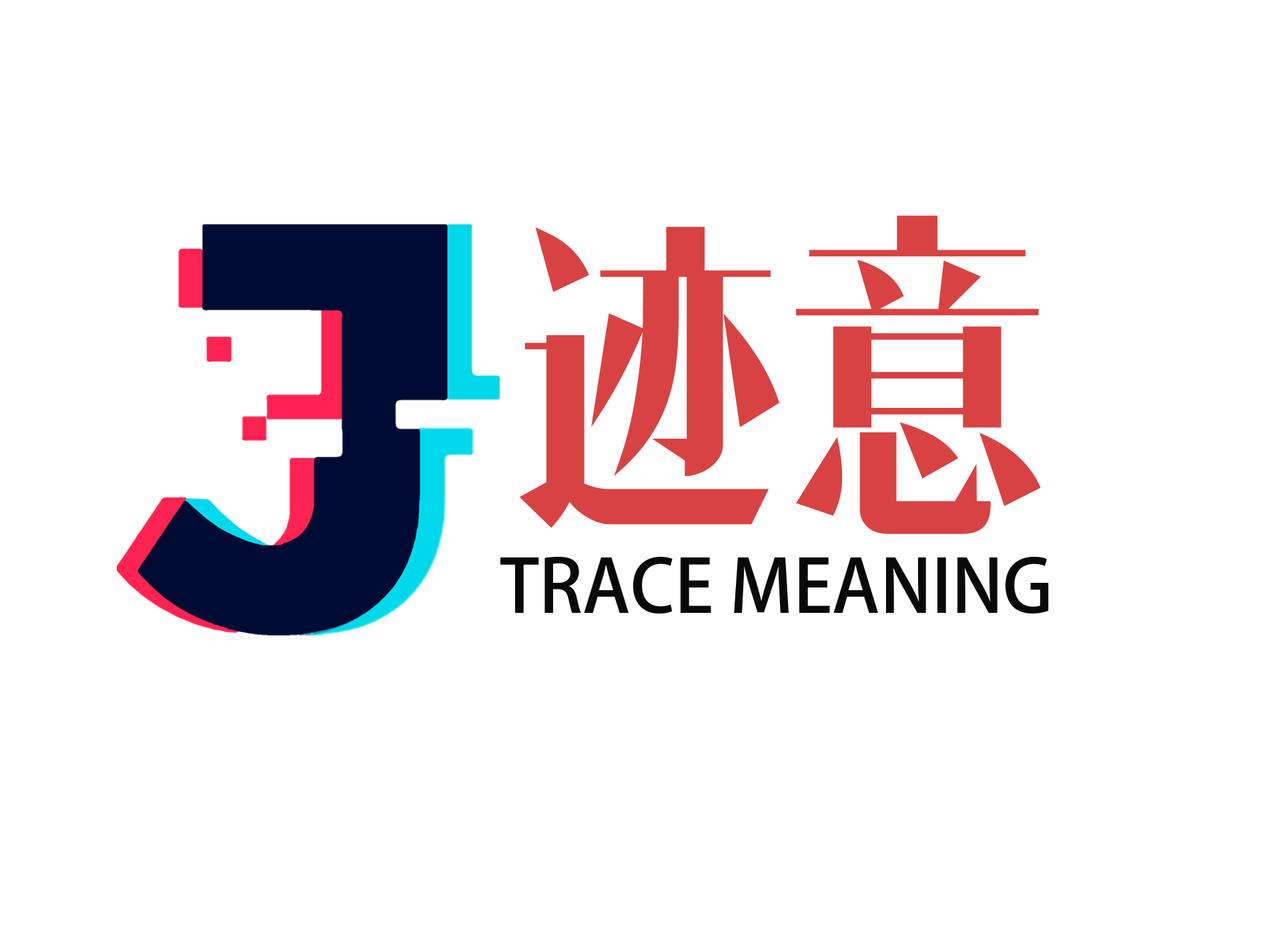
<style>
.page{position:relative;width:1261px;height:946px;background:#ffffff}
.page>*{position:absolute;margin:0}
.t1{font:320.1px "MFLangSongNoncommercial-";color:#d94242}
.t2{font:320.1px "HYc7gf";color:#d94242}
.t3{font:72.6px "AdobeHeitiStd-Regular";color:#090909}
</style>
<div class="page">
<p class="t1" style="left:519px;top:216px;width:522px;height:318px"><span class="t2">迹</span>迹意</p>
<p class="t3" style="left:500px;top:556px;width:549px;height:58px">TRACE MEANING</p>
</div>
